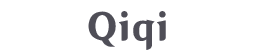
<style>
.page{position:relative;width:256px;height:56px;background:#ffffff}
.page>*{position:absolute;margin:0}
.t1{font:36px "HYWenHei-HEW";color:#4f4e57}
</style>
<div class="page">
<p class="t1" style="left:88px;top:11px;width:78px;height:39px">Qiqi</p>
</div>
